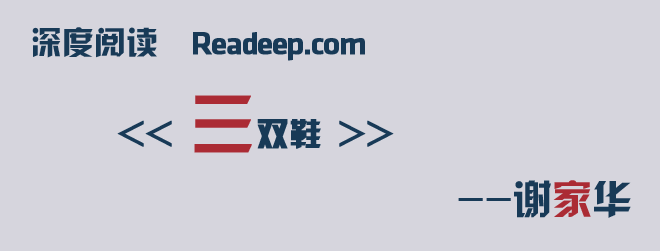
<style>
.page{position:relative;width:660px;height:251px;background:#d6d5dd}
.page>*{position:absolute;margin:0}
.t1{font:32px "HYk2gj";color:#183a57}
.t2{font:32px "KlavikaMedium-OSF";letter-spacing:-0.05em;color:#183a57;font-weight:bold}
.t3{font:32px "HYk2gj";color:#183a57;font-weight:bold}
.t4{font:64px "HYk2gj";color:#ab2b34;font-weight:bold}
.t5{font:40px "HYk2gj";color:#183a57}
.t6{font:40px "HYk2gj";color:#ab2b34}
</style>
<div class="page">
<p class="t1" style="left:32px;top:27px;width:125px;height:31px">深度阅读</p>
<p class="t2" style="left:193px;top:32px;width:172px;height:29px">Readeep.com</p>
<p class="t3" style="left:117px;top:95px;width:277px;height:58px">&lt;&lt; <span class="t4">三</span>双鞋 &gt;&gt;</p>
<p class="t5" style="left:458px;top:180px;width:173px;height:38px">--谢<span class="t6">家</span>华</p>
</div>
